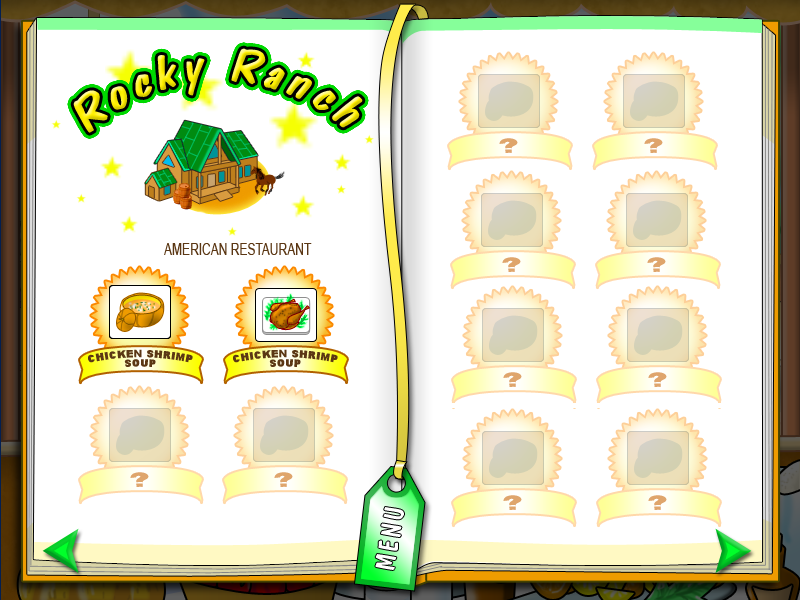
<style>
.page{position:relative;width:800px;height:600px;background:#ffffff}
.page>*{position:absolute;margin:0}
.t1{font:48.9px "DomCasualBT-Regular";letter-spacing:0.095em;font-style:italic}
.t2{font:15.6px "ArialMT";letter-spacing:-0.015em;color:#5b3714;text-transform:uppercase;scale:0.79 1}
.t3{font:9.4px/9.4px "Arial-Black";letter-spacing:0.045em;color:#5b3714;text-transform:uppercase}
.t4{font:18.5px "Arial-Black";letter-spacing:0.045em;color:#dfa56c;text-transform:uppercase}
.t5{font:28.1px "DomCasualBT-Regular";letter-spacing:0.09em;color:#ffffff;font-variant:small-caps}
</style>
<div class="page">
<p class="t1" style="left:73px;top:48px;width:290px;height:85px;rotate:-1deg">Rocky Ranch</p>
<p class="t2" style="left:164px;top:243px;width:148px;height:12px">AMERICAN RESTAURANT</p>
<p class="t3" style="left:233px;top:349px;width:105px;height:18px;text-align:center">chicken shrimp<br>soup</p>
<p class="t4" style="left:130px;top:472px;width:19px;height:15px">?</p>
<p class="t5" style="left:375px;top:507px;width:29px;height:63px;rotate:-80deg">MENU</p>
</div>
